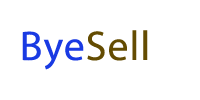
<style>
.page{position:relative;width:200px;height:100px;background:#ffffff}
.page>*{position:absolute;margin:0}
.t1{font:41.7px "MyriadPro-Regular";letter-spacing:0.025em;color:#644c02}
.t2{font:41.7px "MyriadPro-Regular";letter-spacing:0.025em;color:#ffffff}
.t3{font:41.7px "MyriadPro-Regular";letter-spacing:0.025em;color:#193ae3}
</style>
<div class="page">
<p class="t1" style="left:22px;top:30px;width:126px;height:40px"><span class="t2">  </span><span class="t3">Bye</span>Sell</p>
</div>
